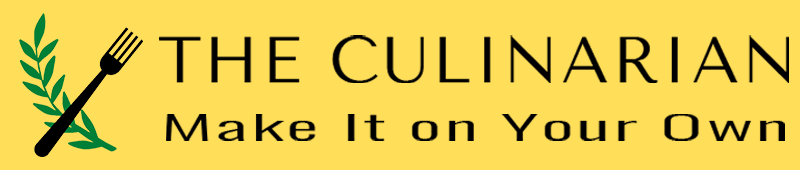
<style>
.page{position:relative;width:800px;height:170px;background:#ffde59}
.page>*{position:absolute;margin:0}
.t1{font:65.5px "TenorSans";letter-spacing:0.04em;color:#000000}
.t2{font:34px "Oswald-Light";letter-spacing:0.04em;color:#000000;scale:2.39 1}
</style>
<div class="page">
<p class="t1" style="left:159px;top:35px;width:630px;height:48px">THE CULINARIAN</p>
<p class="t2" style="left:166px;top:114px;width:619px;height:27px">Make It on Your Own</p>
</div>
